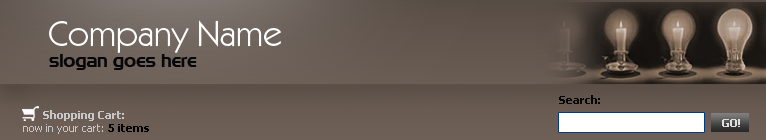
<style>
.page{position:relative;width:766px;height:140px}
.page>*{position:absolute;margin:0}
.t1{font:36px "KabelITCbyBT-Book";color:#ffffff}
.t2{font:18px "Niamey";color:#070709}
.t3{font:11px "Tahoma-Bold";color:#060606}
.t4{font:11px "Tahoma-Bold";color:#c7c7c7}
.t5{font:11px "Tahoma-Bold";color:#e0e0e0;text-transform:uppercase}
</style>
<div class="page">
<p class="t1" style="left:49px;top:20px;width:232px;height:33px">Company Name</p>
<p class="t2" style="left:49px;top:54px;width:148px;height:16px">slogan goes here</p>
<p class="t3" style="left:559px;top:95px;width:41px;height:9px">Search:</p>
<p class="t4" style="left:43px;top:110px;width:81px;height:11px">Shopping Cart:</p>
<p class="t5" style="left:722px;top:119px;width:18px;height:8px">GO!</p>
</div>
